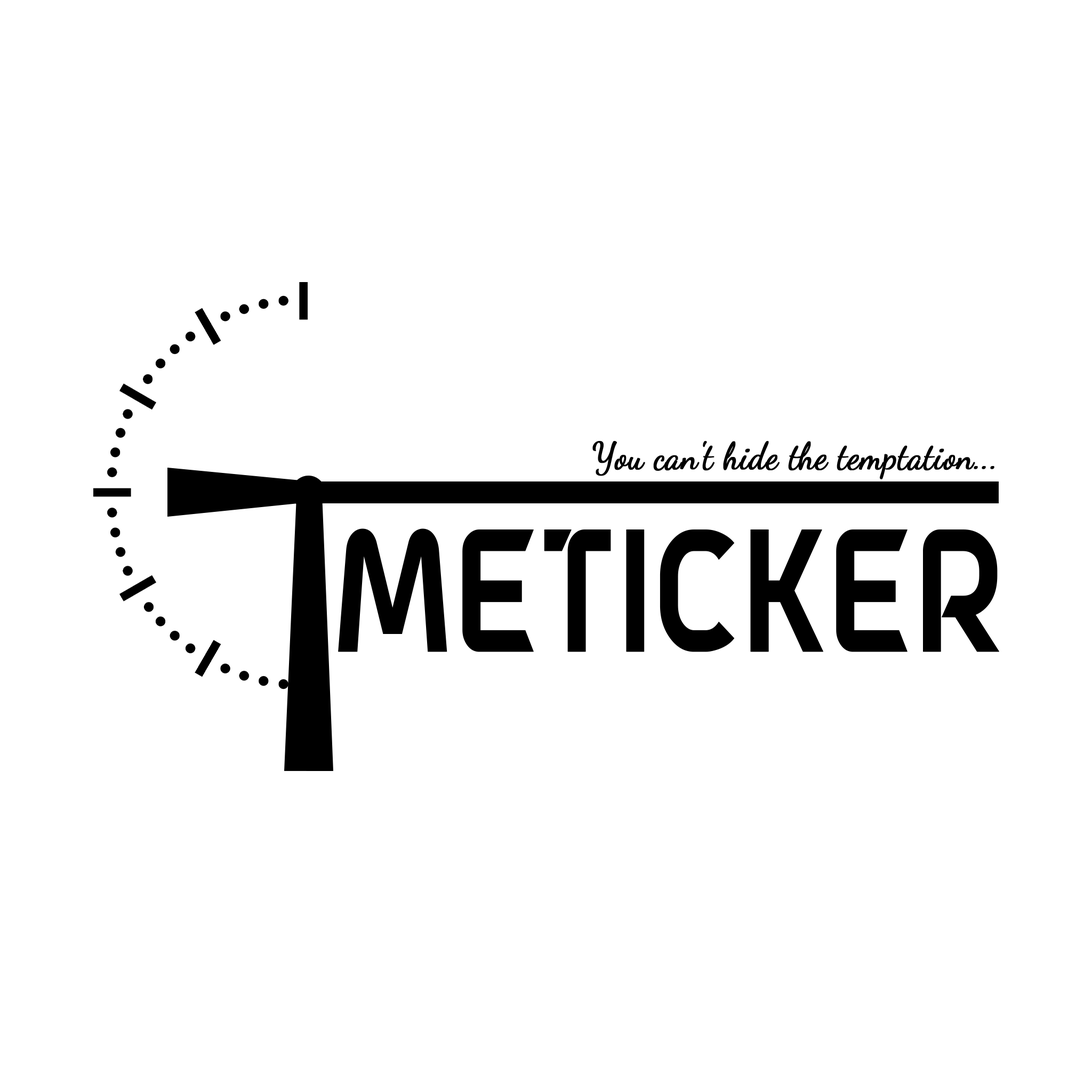
<style>
.page{position:relative;width:1092px;height:1092px;background:#ffffff}
.page>*{position:absolute;margin:0}
.t1{font:37.7px "DancingScript-Regular";color:#000000;font-weight:bold;scale:0.9 1}
.t2{font:164.1px "aAstroSpace";color:#000000;font-weight:bold;scale:0.71 1}
</style>
<div class="page">
<p class="t1" style="left:592px;top:441px;width:402px;height:38px">You can't hide the temptation...</p>
<p class="t2" style="left:304px;top:528px;width:695px;height:124px">imeticker</p>
</div>
